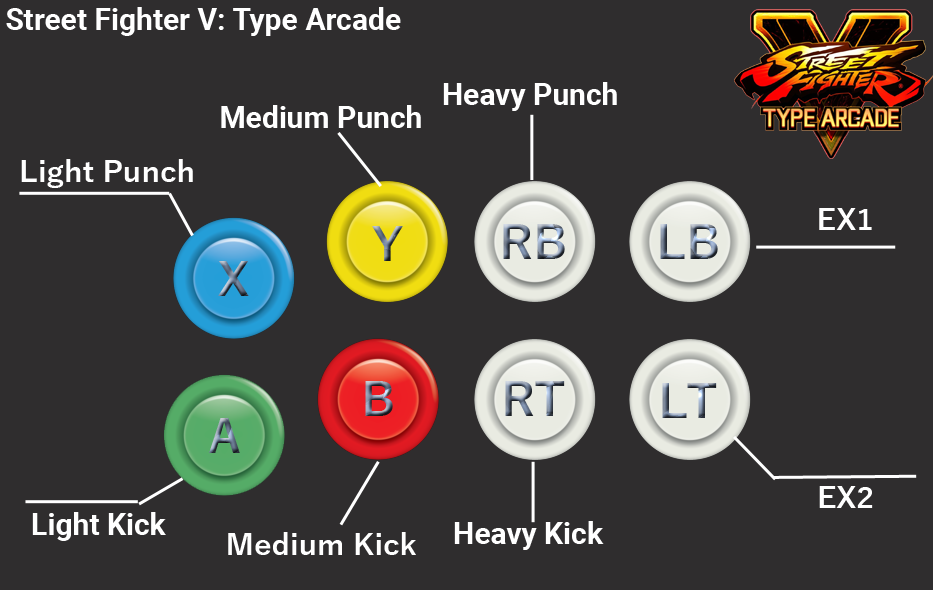
<style>
.page{position:relative;width:933px;height:590px;background:#2f2d2e}
.page>*{position:absolute;margin:0}
.t1{font:30px "Roboto-Bold";color:#ffffff}
.t2{font:30px "YuGothic-Bold";color:#ffffff}
</style>
<div class="page">
<p class="t1" style="left:6px;top:7px;width:395px;height:29px">Street Fighter V: Type Arcade</p>
<p class="t1" style="left:443px;top:82px;width:174px;height:29px">Heavy Punch</p>
<p class="t1" style="left:221px;top:105px;width:200px;height:23px">Medium Punch</p>
<p class="t2" style="left:21px;top:159px;width:172px;height:29px">Light Punch</p>
<p class="t2" style="left:819px;top:208px;width:53px;height:22px">EX1</p>
<p class="t2" style="left:819px;top:486px;width:54px;height:22px">EX2</p>
<p class="t1" style="left:32px;top:512px;width:134px;height:29px">Light Kick</p>
<p class="t1" style="left:454px;top:521px;width:150px;height:29px">Heavy Kick</p>
<p class="t2" style="left:228px;top:532px;width:188px;height:23px">Medium Kick</p>
</div>
